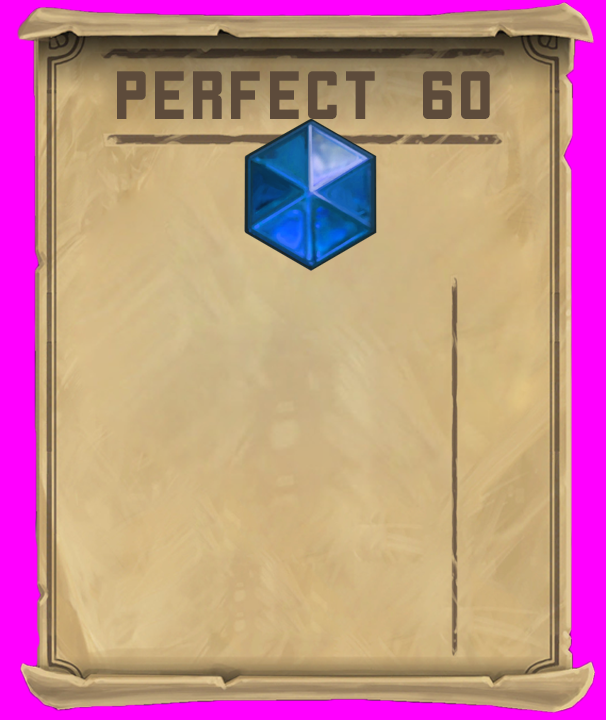
<style>
.page{position:relative;width:606px;height:720px}
.page>*{position:absolute;margin:0}
.t1{font:66.5px "Cornerstone";color:#5d4b3b}
</style>
<div class="page">
<p class="t1" style="left:117px;top:71px;width:373px;height:48px">Perfect 60</p>
</div>
